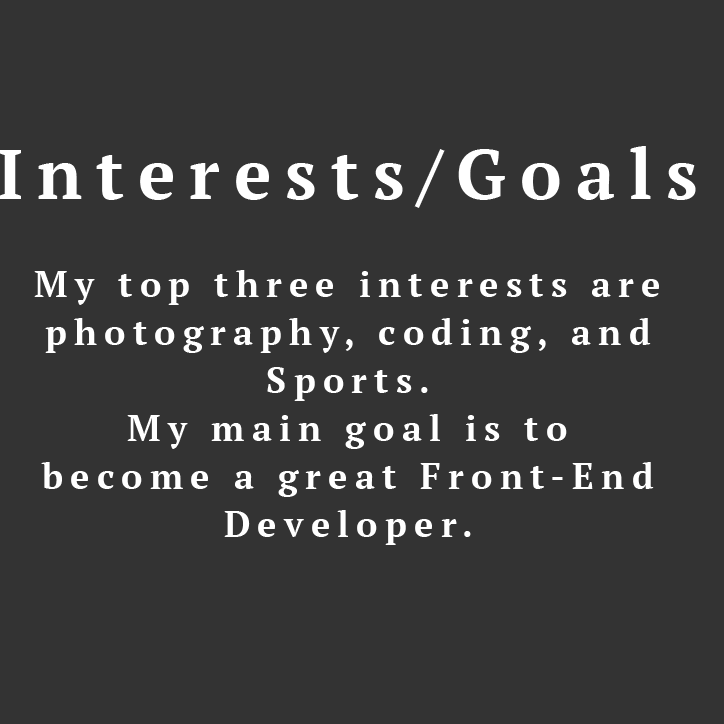
<style>
.page{position:relative;width:724px;height:724px;background:#333333}
.page>*{position:absolute;margin:0}
.t1{font:70px "PTSerif-Bold";letter-spacing:0.2em;color:#ffffff}
.t2{font:36px/48px "PTSerif-Bold";letter-spacing:0.2em;color:#ffffff}
</style>
<div class="page">
<p class="t1" style="left:0px;top:146px;width:696px;height:62px">Interests/Goals</p>
<p class="t2" style="left:34px;top:270px;width:625px;height:275px;text-align:center">My top three interests are photography, coding, and Sports. <br>My main goal is to become a great Front-End Developer.</p>
</div>
